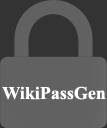
<style>
.page{position:relative;width:107px;height:128px;background:#616161}
.page>*{position:absolute;margin:0}
.t1{font:18px "TimesNewRomanPS-BoldMT";color:#ffffff}
</style>
<div class="page">
<p class="t1" style="left:2px;top:86px;width:104px;height:14px">WikiPassGen</p>
</div>
